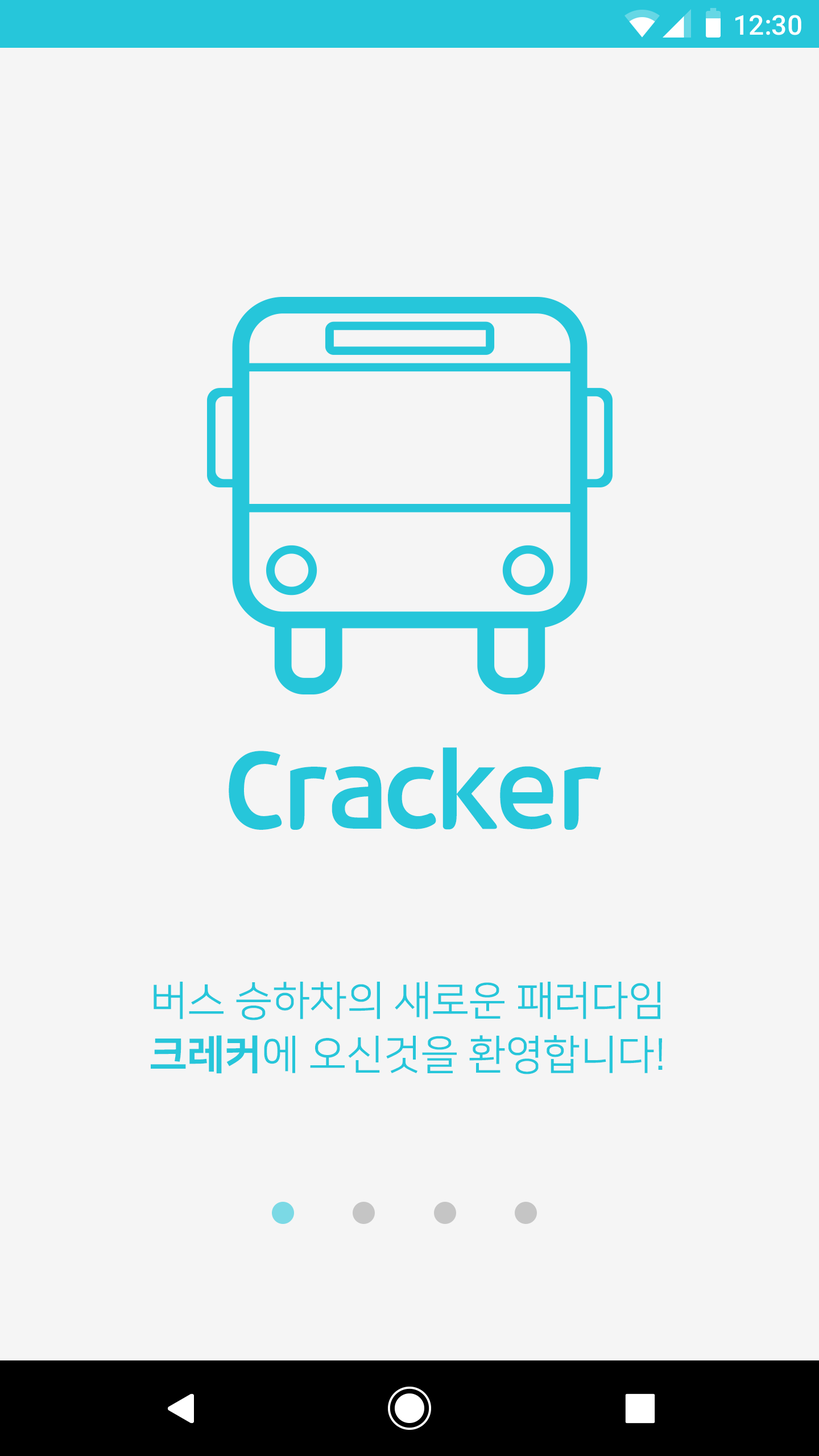
<style>
.page{position:relative;width:819px;height:1456px;background:#f5f5f5}
.page>*{position:absolute;margin:0}
.t1{font:27.3px "Roboto-Medium";color:#ffffff}
.t2{font:108.4px "12LotteMartHappyBold";color:#26c6da}
.t3{font:40.9px/54px "NanumSquareR";color:#26c6da}
.t4{font:40.9px/54px "NanumSquareEB";color:#26c6da}
</style>
<div class="page">
<p class="t1" style="left:735px;top:15px;width:66px;height:20px">12:30</p>
<p class="t2" style="left:229px;top:747px;width:372px;height:83px">Cracker</p>
<p class="t3" style="left:151px;top:982px;width:512px;height:92px;text-align:center">버스 승하차의 새로운 패러다임<br><span class="t4">크레커</span>에 오신것을 환영합니다!</p>
</div>
